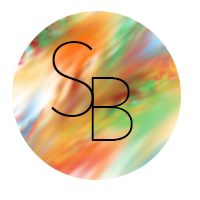
<style>
.page{position:relative;width:200px;height:200px;background:#ffffff}
.page>*{position:absolute;margin:0}
.t1{font:100.7px "AvenirNext-UltraLight";color:#000000}
.t2{font:90.9px "AvenirNext-UltraLight";color:#000000}
</style>
<div class="page">
<p class="t1" style="left:51px;top:41px;width:43px;height:76px">S</p>
<p class="t2" style="left:91px;top:77px;width:42px;height:64px">B</p>
</div>
